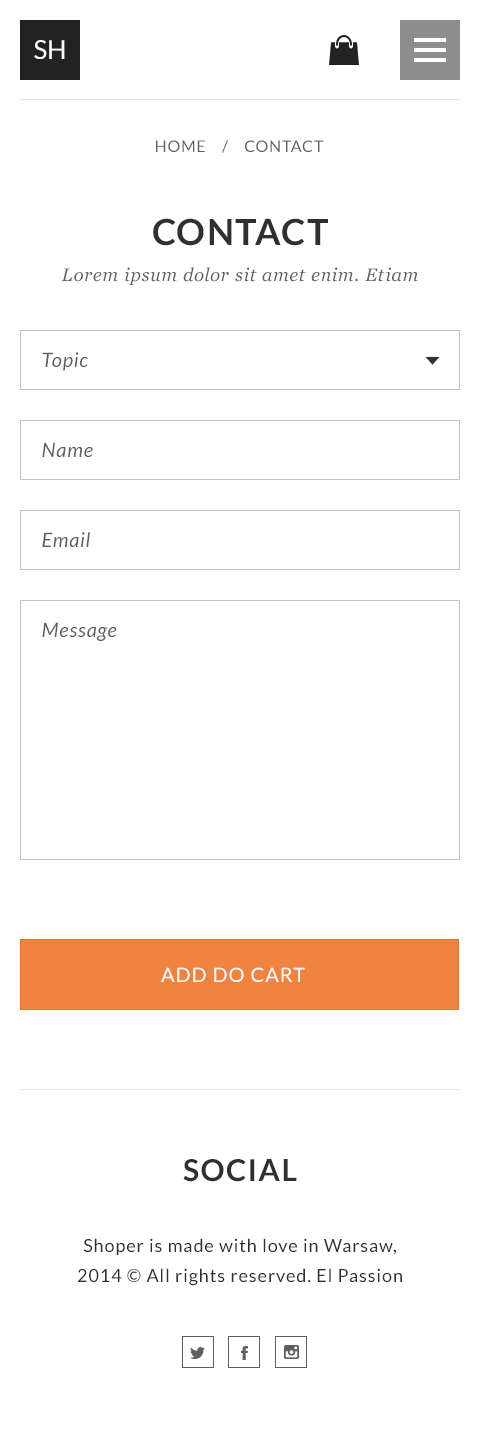
<style>
.page{position:relative;width:480px;height:1450px;background:#ffffff}
.page>*{position:absolute;margin:0}
.t1{font:25.9px "Lato-Regular";color:#ffffff;text-transform:uppercase}
.t2{font:16px "Lato-Regular";letter-spacing:0.05em;color:#606060;text-transform:uppercase}
.t3{font:18px/36px "Georgia-Italic";letter-spacing:0.05em;color:#606060}
.t4{font:36px/36px "Lato-Bold";letter-spacing:0.05em;color:#303030;text-transform:uppercase}
.t5{font:20px "Lato-Italic";letter-spacing:0.05em;color:#606060}
.t6{font:20px "Lato-Regular";letter-spacing:0.05em;color:#ffffff;text-transform:uppercase}
.t7{font:30px "Lato-Bold";letter-spacing:0.05em;color:#303030;text-transform:uppercase}
.t8{font:18px/30px "Lato-Regular";letter-spacing:0.05em;color:#303030}
</style>
<div class="page">
<p class="t1" style="left:34px;top:40px;width:31px;height:19px">SH</p>
<p class="t2" style="left:156px;top:140px;width:168px;height:13px">HOME    /    contact</p>
<p class="t3" style="left:61px;top:218px;width:357px;height:67px;text-align:center"><span class="t4">ContacT<br></span>Lorem ipsum dolor sit amet enim. Etiam ullamcorp uspendisse a pellentesque.</p>
<p class="t5" style="left:42px;top:352px;width:46px;height:19px">Topic</p>
<p class="t5" style="left:42px;top:442px;width:51px;height:15px">Name</p>
<p class="t5" style="left:42px;top:532px;width:48px;height:15px">Email</p>
<p class="t5" style="left:42px;top:622px;width:75px;height:19px">Message</p>
<p class="t6" style="left:161px;top:967px;width:144px;height:15px">Add do cart</p>
<p class="t7" style="left:183px;top:1159px;width:114px;height:23px">social</p>
<p class="t8" style="left:78px;top:1238px;width:324px;height:48px;text-align:center">Shoper is made with love in Warsaw,<br>2014 © All rights reserved. El Passion</p>
</div>
